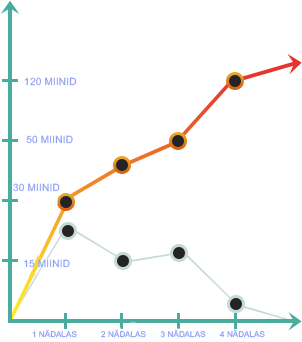
<style>
.page{position:relative;width:302px;height:342px;background:#ffffff}
.page>*{position:absolute;margin:0}
.t1{font:10px "ArialMT";letter-spacing:0.02em;color:#90a2f4;text-transform:uppercase}
.t2{font:8px "ArialMT";letter-spacing:0.02em;color:#90a2f4;text-transform:uppercase}
</style>
<div class="page">
<p class="t1" style="left:24px;top:77px;width:53px;height:9px">120 miinid</p>
<p class="t1" style="left:26px;top:135px;width:47px;height:9px">50 miinid</p>
<p class="t1" style="left:13px;top:183px;width:47px;height:9px">30 miinid</p>
<p class="t1" style="left:24px;top:259px;width:46px;height:9px">15 miinid</p>
<p class="t2" style="left:32px;top:329px;width:45px;height:9px">1 nädalas</p>
<p class="t2" style="left:101px;top:329px;width:45px;height:9px">2 nädalas</p>
<p class="t2" style="left:160px;top:329px;width:46px;height:9px">3 nädalas</p>
<p class="t2" style="left:219px;top:329px;width:46px;height:9px">4 nädalas</p>
</div>
